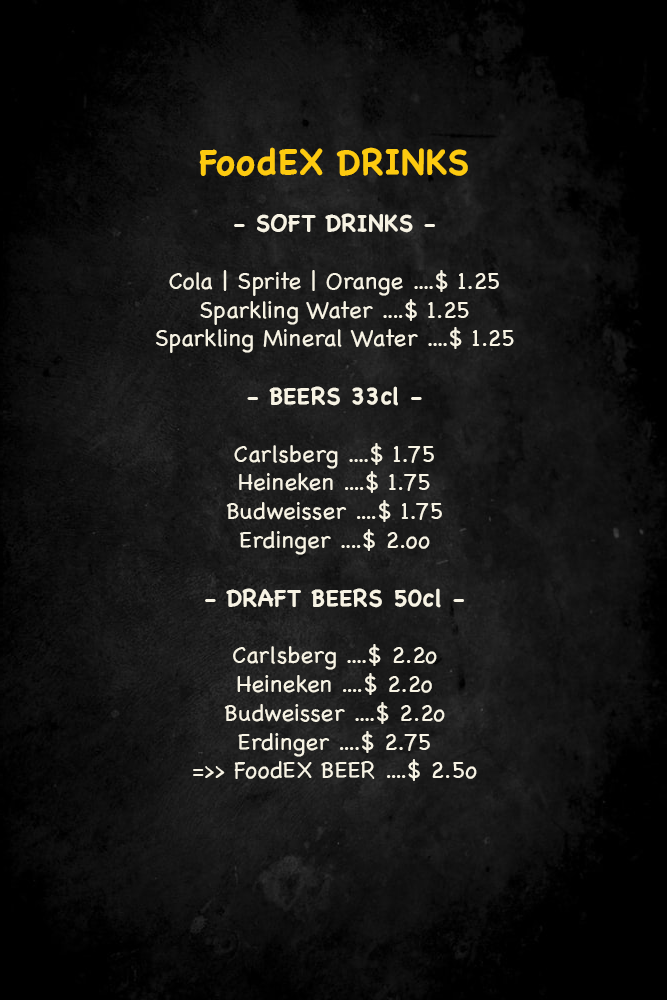
<style>
.page{position:relative;width:667px;height:1000px}
.page>*{position:absolute;margin:0}
.t1{font:24px "Chalkboard";color:#f7f3e4}
.t2{font:36px "Chalkboard-Bold";color:#fdca0f}
.t3{font:24px "Chalkboard-Bold";color:#f7f3e4}
</style>
<div class="page">
<p class="t1" style="left:156px;top:147px;width:358px;height:634px;text-align:center"><span class="t2">FoodEX DRINKS <br><br></span><span class="t3">- SOFT DRINKS -<br><br></span>Cola | Sprite | Orange ....$ 1.25<br>Sparkling Water ....$ 1.25 <br>Sparkling Mineral Water ....$ 1.25 <br><br><span class="t3">- BEERS 33cl -<br><br></span>Carlsberg ....$ 1.75<br>Heineken ....$ 1.75<br>Budweisser ....$ 1.75<br>Erdinger ....$ 2.oo<br><br><span class="t3">- DRAFT BEERS 50cl -<br><br></span>Carlsberg ....$ 2.2o<br>Heineken ....$ 2.2o<br>Budweisser ....$ 2.2o<br>Erdinger ....$ 2.75<br>=&gt;&gt; FoodEX BEER ....$ 2.5o</p>
</div>
